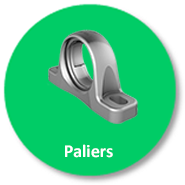
<style>
.page{position:relative;width:185px;height:185px;background:#00cc66}
.page>*{position:absolute;margin:0}
.t1{font:18px "Calibri-Bold";color:#ffffff}
</style>
<div class="page">
<p class="t1" style="left:65px;top:144px;width:48px;height:14px">Paliers</p>
</div>
